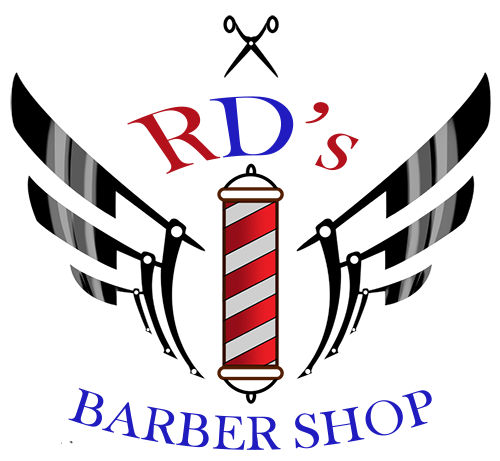
<style>
.page{position:relative;width:500px;height:461px;background:#ffffff}
.page>*{position:absolute;margin:0}
.t1{font:83.3px "BaskOldFace";color:#b3121c}
.t2{font:83.3px "BaskOldFace";color:#201cbf}
.t3{font:50px "BaskOldFace";color:#201cbf}
</style>
<div class="page">
<p class="t1" style="left:127px;top:96px;width:232px;height:78px">R<span class="t2">D</span>’s</p>
<p class="t3" style="left:68px;top:388px;width:364px;height:62px">BARBER SHOP</p>
</div>
